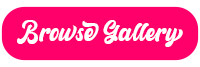
<style>
.page{position:relative;width:200px;height:67px;background:#ff006a}
.page>*{position:absolute;margin:0}
.t1{font:24.5px "RetrowMentho";color:#ffffff}
</style>
<div class="page">
<p class="t1" style="left:17px;top:20px;width:166px;height:27px">Browse Gallery</p>
</div>
